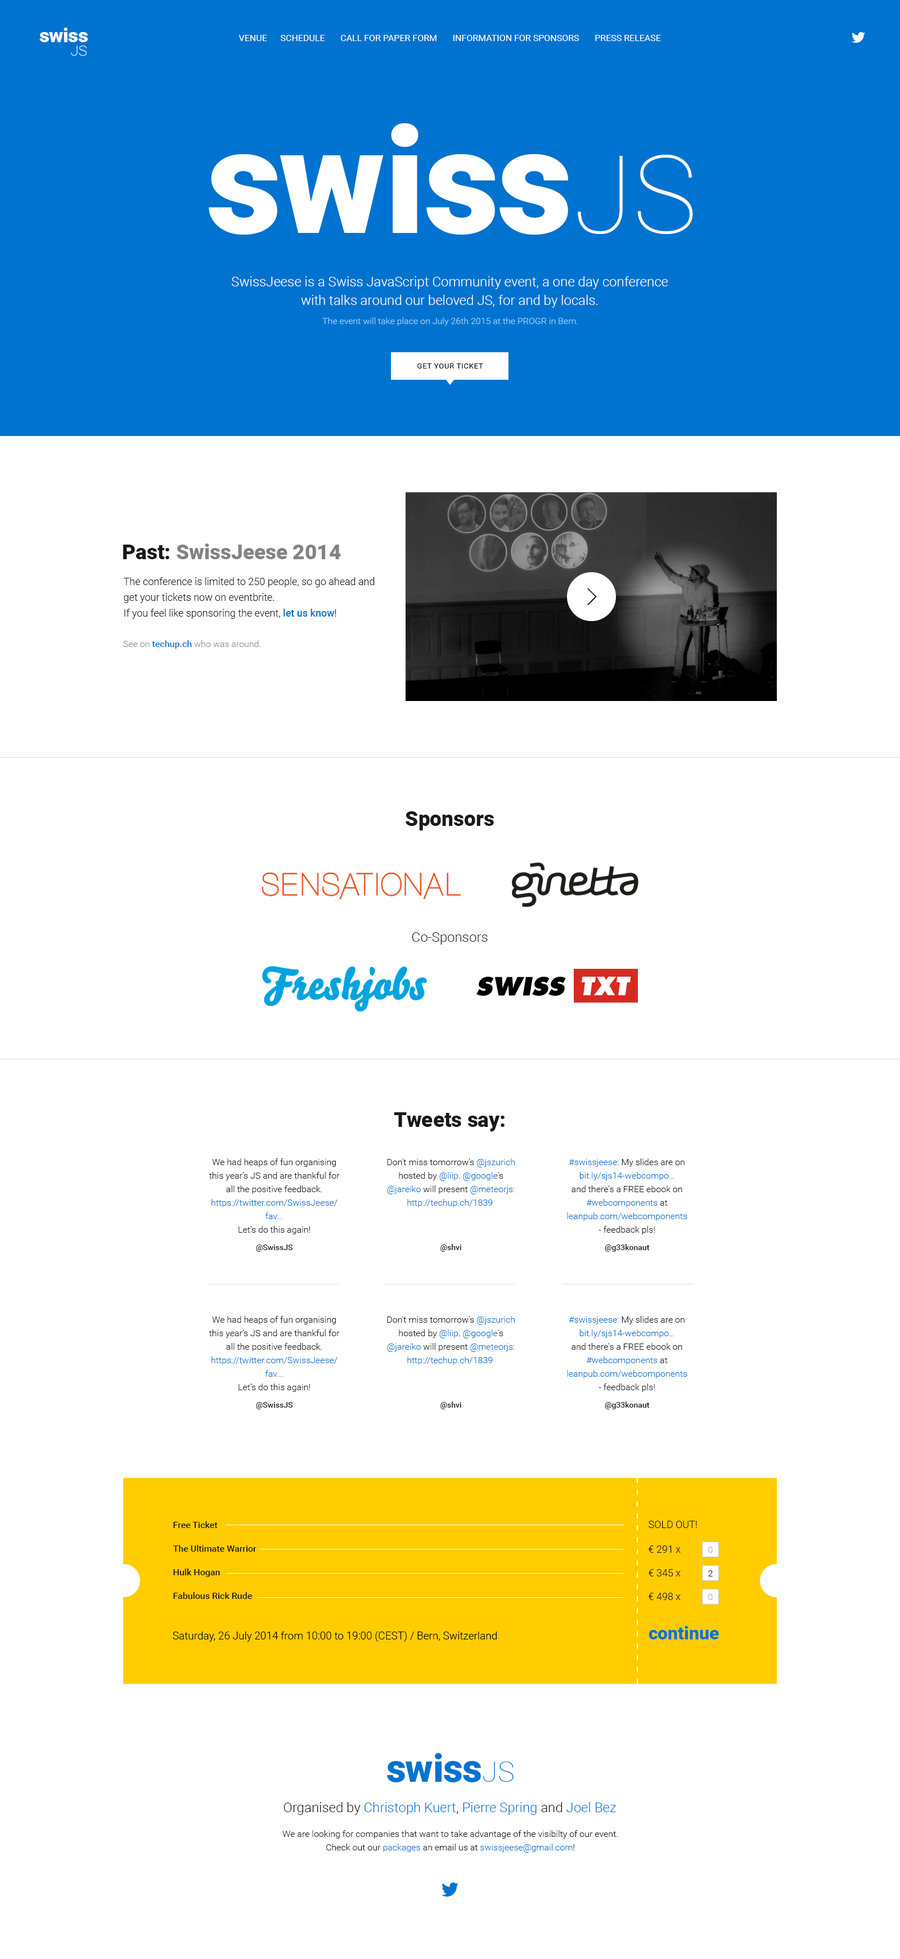
<style>
.page{position:relative;width:900px;height:1959px;background:#ffffff}
.page>*{position:absolute;margin:0}
.t1{font:19.4px "Roboto-Black";letter-spacing:-0.01em;color:#ffffff}
.t2{font:19.4px "Roboto-Black";letter-spacing:-0.02em;color:#ffffff}
.t3{font:19.4px "Roboto-Black";color:#ffffff}
.t4{font:9px "Roboto-Regular";color:#ffffff;text-transform:uppercase}
.t5{font:14.4px "Roboto-Thin";color:#ffffff}
.t6{font:146.7px "Roboto-Black";letter-spacing:-0.01em;color:#ffffff}
.t7{font:146.7px "Roboto-Black";letter-spacing:-0.02em;color:#ffffff}
.t8{font:146.7px "Roboto-Black";color:#ffffff}
.t9{font:108.3px "Roboto-Thin";color:#ffffff}
.t10{font:13.5px/18.6px "Roboto-Light";color:#ffffff}
.t11{font:9px "Roboto-Light";color:#9bd2ff}
.t12{font:7.3px "Roboto-Regular";letter-spacing:0.06em;color:#000000;text-transform:uppercase}
.t13{font:20.8px "Roboto-Black";color:#848484}
.t14{font:20.8px "Roboto-Black";color:#191919}
.t15{font:10.1px/15.8px "Roboto-Light";color:#191919}
.t16{font:10.1px/15.8px "Roboto-Medium";color:#0073d0}
.t17{font:9px "Roboto-Light";color:#909090}
.t18{font:9px "Roboto-Medium";color:#0073d0}
.t19{font:13.5px "Roboto-Light";color:#191919}
.t20{font:9px/13.5px "Roboto-Light";color:#191919}
.t21{font:9px/13.5px "Roboto-Light";color:#0073d0}
.t22{font:9px/13.5px "Roboto-Light";color:#0075d1}
.t23{font:7.9px "Roboto-Medium";color:#191919}
.t24{font:9px/23.6px "Roboto-Medium";color:#191919}
.t25{font:10.1px "Roboto-Light";color:#191919;text-transform:uppercase}
.t26{font:10.1px/23.6px "Roboto-Light";color:#191919}
.t27{font:9px "Roboto-Light";color:#a9afb3}
.t28{font:9px "Roboto-Light";color:#191919}
.t29{font:18px "Roboto-Black";color:#0074d0}
.t30{font:10.7px "Roboto-Light";color:#000000}
.t31{font:38.4px "Roboto-Black";letter-spacing:-0.01em;color:#0073d0}
.t32{font:38.4px "Roboto-Black";letter-spacing:-0.02em;color:#0073d0}
.t33{font:38.4px "Roboto-Black";color:#0073d0}
.t34{font:28.3px "Roboto-Thin";color:#0073d0}
.t35{font:13.5px "Roboto-Light";color:#0073d0}
</style>
<div class="page">
<p class="t1" style="left:39px;top:28px;width:49px;height:14px"><span class="t2">s</span><span class="t3">w</span>is<span class="t3">s</span></p>
<p class="t4" style="left:239px;top:35px;width:422px;height:6px">Venue      Schedule       Call for paper form       Information for sponsors       Press release</p>
<p class="t5" style="left:71px;top:46px;width:16px;height:10px">JS</p>
<p class="t6" style="left:209px;top:123px;width:359px;height:112px"><span class="t7">s</span><span class="t8">w</span>is<span class="t8">s</span></p>
<p class="t9" style="left:578px;top:155px;width:115px;height:79px">JS</p>
<p class="t10" style="left:232px;top:276px;width:436px;height:32px;text-align:center">SwissJeese is a Swiss JavaScript Community event, a one day conference<br>with talks around our beloved JS, for and by locals.</p>
<p class="t11" style="left:322px;top:317px;width:256px;height:9px">The event will take place on July 26th 2015 at the PROGR in Bern.</p>
<p class="t12" style="left:417px;top:363px;width:66px;height:5px">get your ticket</p>
<p class="t13" style="left:123px;top:543px;width:218px;height:16px"><span class="t14">Past: </span>SwissJeese 2014</p>
<p class="t15" style="left:123px;top:577px;width:252px;height:42px">The conference is limited to 250 people, so go ahead and <br>get your tickets now on eventbrite. <br>If you feel like sponsoring the event, <span class="t16">let us know</span>!</p>
<p class="t17" style="left:123px;top:640px;width:138px;height:9px">See on <span class="t18">techup.ch </span>who was around.</p>
<p class="t14" style="left:406px;top:811px;width:88px;height:19px">Sponsors</p>
<p class="t19" style="left:412px;top:932px;width:76px;height:12px">Co-Sponsors</p>
<p class="t14" style="left:394px;top:1112px;width:111px;height:19px">Tweets say:</p>
<p class="t20" style="left:209px;top:1158px;width:131px;height:76px;text-align:center">We had heaps of fun organising<br>this year’s JS and are thankful for<br>all the positive feedback.<br><span class="t21">https://twitter.com/SwissJeese/<br>fav...<br></span>Let’s do this again!</p>
<p class="t21" style="left:387px;top:1158px;width:128px;height:49px;text-align:center"><span class="t20">Don't miss tomorrow's </span><span class="t22">@jszurich<br></span><span class="t20">hosted by </span>@liip<span class="t20">. </span>@google<span class="t20">'s<br></span>@jareiko<span class="t20"> will present </span>@meteorjs:<br>http://techup.ch/1839</p>
<p class="t20" style="left:567px;top:1158px;width:120px;height:76px;text-align:center"><span class="t21">#swissjeese:</span> My slides are on<br><span class="t21">bit.ly/sjs14-webcompo…<br></span>and there's a FREE ebook on<br><span class="t21">#webcomponents </span>at<br><span class="t21">leanpub.com/webcomponents<br></span>- feedback pls!</p>
<p class="t23" style="left:256px;top:1244px;width:37px;height:8px">@SwissJS</p>
<p class="t23" style="left:440px;top:1244px;width:21px;height:8px">@shvi</p>
<p class="t23" style="left:605px;top:1244px;width:45px;height:8px">@g33konaut</p>
<p class="t20" style="left:209px;top:1316px;width:131px;height:76px;text-align:center">We had heaps of fun organising<br>this year’s JS and are thankful for<br>all the positive feedback.<br><span class="t21">https://twitter.com/SwissJeese/<br>fav...<br></span>Let’s do this again!</p>
<p class="t21" style="left:387px;top:1316px;width:128px;height:49px;text-align:center"><span class="t20">Don't miss tomorrow's </span><span class="t22">@jszurich<br></span><span class="t20">hosted by </span>@liip<span class="t20">. </span>@google<span class="t20">'s<br></span>@jareiko<span class="t20"> will present </span>@meteorjs:<br>http://techup.ch/1839</p>
<p class="t20" style="left:567px;top:1316px;width:120px;height:76px;text-align:center"><span class="t21">#swissjeese:</span> My slides are on<br><span class="t21">bit.ly/sjs14-webcompo…<br></span>and there's a FREE ebook on<br><span class="t21">#webcomponents </span>at<br><span class="t21">leanpub.com/webcomponents<br></span>- feedback pls!</p>
<p class="t23" style="left:256px;top:1402px;width:37px;height:7px">@SwissJS</p>
<p class="t23" style="left:440px;top:1401px;width:21px;height:8px">@shvi</p>
<p class="t23" style="left:605px;top:1401px;width:45px;height:8px">@g33konaut</p>
<p class="t24" style="left:173px;top:1521px;width:84px;height:78px">Free Ticket<br>The Ultimate Warrior<br>Hulk Hogan<br>Fabulous Rick Rude</p>
<p class="t25" style="left:649px;top:1520px;width:48px;height:8px">Sold out!</p>
<p class="t26" style="left:649px;top:1545px;width:32px;height:55px">€ 291 x<br>€ 345 x<br>€ 498 x</p>
<p class="t27" style="left:708px;top:1546px;width:5px;height:7px">0</p>
<p class="t28" style="left:708px;top:1570px;width:5px;height:6px">2</p>
<p class="t27" style="left:708px;top:1594px;width:5px;height:6px">0</p>
<p class="t29" style="left:649px;top:1626px;width:70px;height:13px">continue</p>
<p class="t30" style="left:173px;top:1631px;width:324px;height:10px">Saturday, 26 July 2014 from 10:00 to 19:00 (CEST) / Bern, Switzerland</p>
<p class="t31" style="left:387px;top:1753px;width:94px;height:29px"><span class="t32">s</span><span class="t33">w</span>is<span class="t33">s</span></p>
<p class="t34" style="left:483px;top:1761px;width:31px;height:20px">JS</p>
<p class="t35" style="left:284px;top:1802px;width:333px;height:13px"><span class="t19">Organised by </span>Christoph Kuert<span class="t19">, </span>Pierre Spring<span class="t19"> and </span>Joel Bez</p>
<p class="t20" style="left:282px;top:1830px;width:336px;height:22px;text-align:center">We are looking for companies that want to take advantage of the visibilty of our event.<br>Check out our <span class="t21">packages</span> an email us at <span class="t21">swissjeese@gmail.com</span>!</p>
</div>
